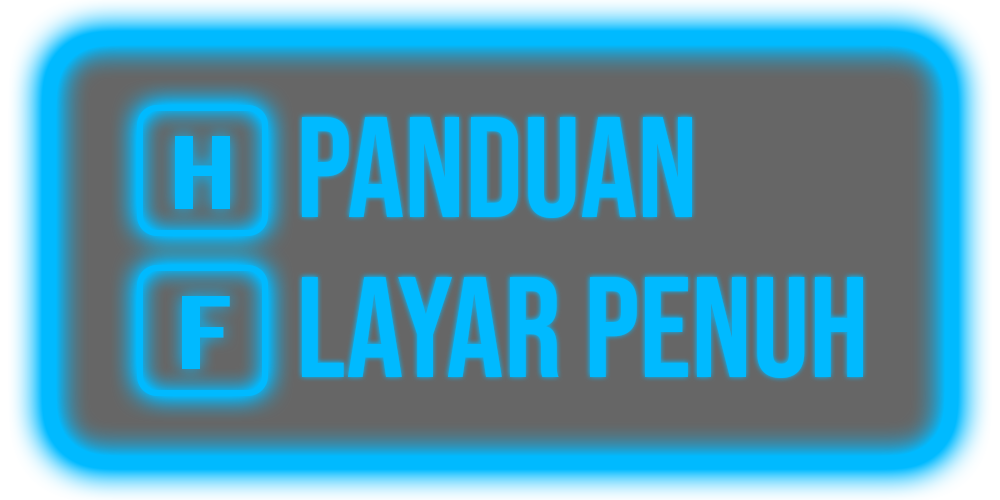
<style>
.page{position:relative;width:1000px;height:500px;background:#666666}
.page>*{position:absolute;margin:0}
.t1{font:142.7px "BebasNeue-Regular";color:#00baff}
.t2{font:104.2px "BebasNeue-Regular";color:#00baff;scale:1.57 1}
</style>
<div class="page">
<p class="t1" style="left:302px;top:117px;width:390px;height:101px">PANDUAN</p>
<p class="t2" style="left:175px;top:136px;width:55px;height:73px">H</p>
<p class="t1" style="left:302px;top:277px;width:561px;height:101px">LAYAR PENUH</p>
<p class="t2" style="left:182px;top:296px;width:48px;height:73px">f</p>
</div>
